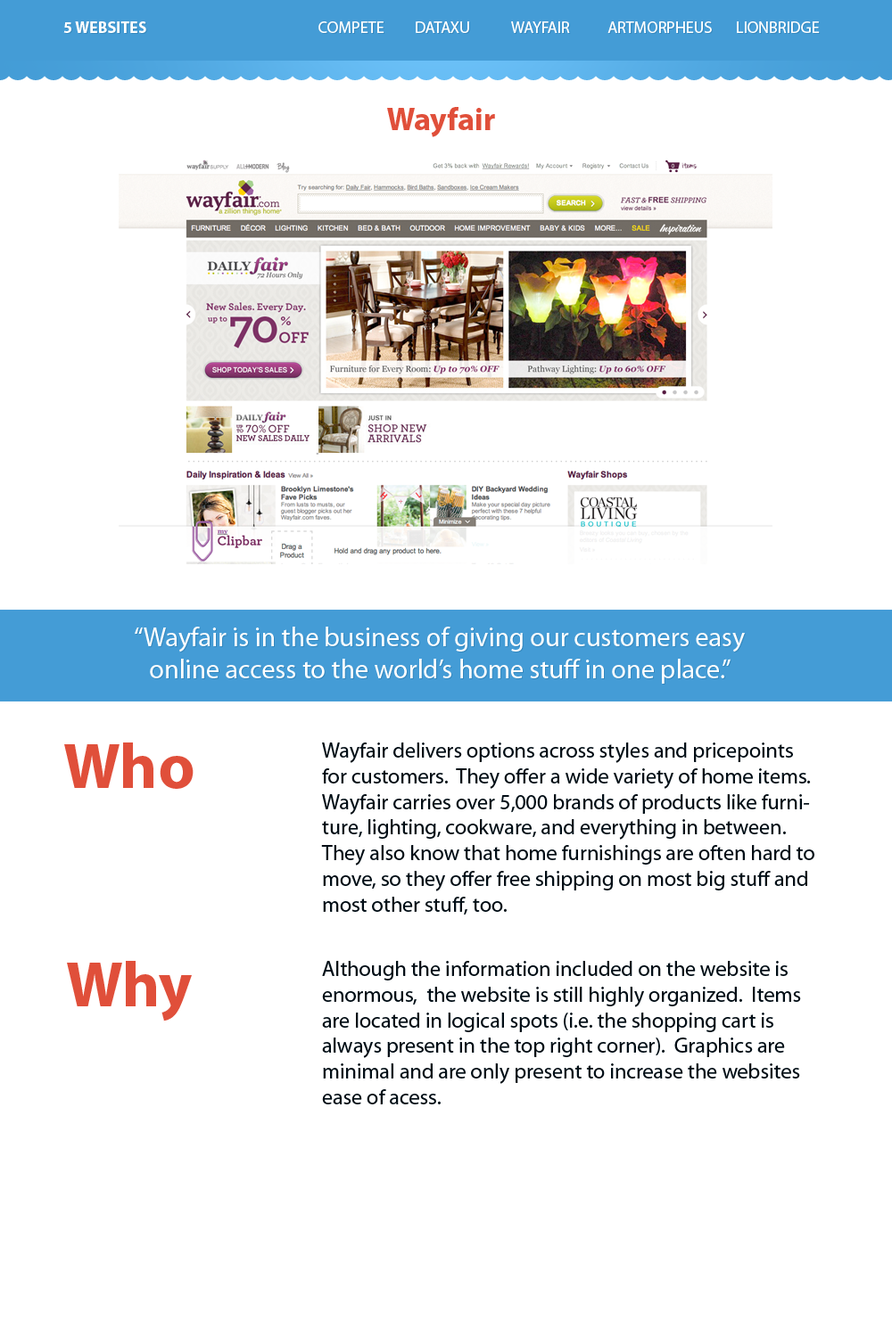
<style>
.page{position:relative;width:892px;height:1337px;background:#ffffff}
.page>*{position:absolute;margin:0}
.t1{font:16px "MyriadPro-Bold";color:#ffffff}
.t2{font:16px "MyriadPro-Regular";color:#ffffff}
.t3{font:32.1px "MyriadPro-Bold";color:#e04f3a}
.t4{font:26.7px "MyriadPro-Regular";color:#ffffff}
.t5{font:64.2px "MyriadPro-Bold";color:#e04f3a}
.t6{font:21.4px "MyriadPro-Regular";color:#000d15}
</style>
<div class="page">
<p class="t1" style="left:63px;top:21px;width:83px;height:12px">5 WEBSITES</p>
<p class="t2" style="left:318px;top:21px;width:501px;height:12px">COMPETE DATAXU  WAYFAIR  ARTMORPHEUS LIONBRIDGE</p>
<p class="t3" style="left:387px;top:107px;width:108px;height:30px">Wayfair</p>
<p class="t4" style="left:135px;top:627px;width:609px;height:57px;text-align:center">“Wayfair is in the business of giving our customers easy<br>online access to the world’s home stuff in one place.”</p>
<p class="t5" style="left:64px;top:743px;width:129px;height:46px">Who</p>
<p class="t6" style="left:321px;top:743px;width:493px;height:173px">Wayfair delivers options across styles and pricepoints for customers.  They offer a wide variety of home items.  Wayfair carries over 5,000 brands of products like furniture, lighting, cookware, and everything in between. They also know that home furnishings are often hard to move, so they offer free shipping on most big stuff and most other stuff, too.</p>
<p class="t5" style="left:67px;top:961px;width:125px;height:61px">Why</p>
<p class="t6" style="left:322px;top:961px;width:479px;height:144px">Although the information included on the website is enormous,  the website is still highly organized.  Items are located in logical spots (i.e. the shopping cart is always present in the top right corner).  Graphics are minimal and are only present to increase the websites ease of acess.</p>
</div>
